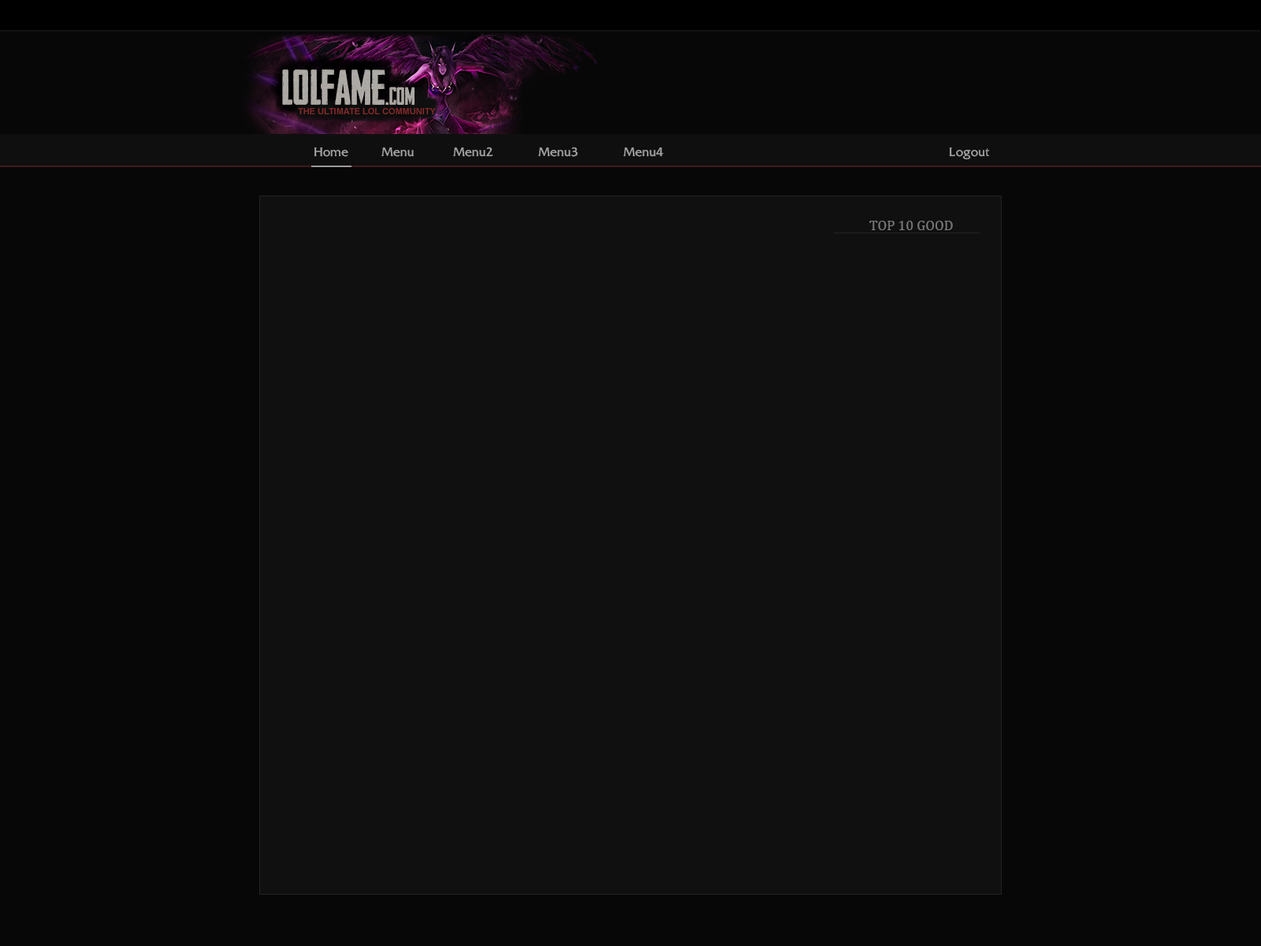
<style>
.page{position:relative;width:1261px;height:946px;background:#070707}
.page>*{position:absolute;margin:0}
.t1{font:47.3px "HeadlinerNo.45";color:#aca8a4}
.t2{font:23.6px "HeadlinerNo.45";color:#aca8a4}
.t3{font:8.7px "Arial-BoldMT";color:#802a2a}
.t4{font:14.2px "FrizQuadrata-Thin";color:#a5a5a5}
.t5{font:14.2px "Cambria";color:#797979}
</style>
<div class="page">
<p class="t1" style="left:282px;top:69px;width:133px;height:36px">LOLFame<span class="t2">.com</span></p>
<p class="t3" style="left:298px;top:108px;width:138px;height:6px">THE ULTIMATE LOL COMMUNITY</p>
<p class="t4" style="left:314px;top:147px;width:34px;height:10px">Home</p>
<p class="t4" style="left:381px;top:147px;width:33px;height:10px">Menu</p>
<p class="t4" style="left:453px;top:147px;width:211px;height:10px">Menu2  Menu3  Menu4</p>
<p class="t4" style="left:949px;top:147px;width:41px;height:13px">Logout</p>
<p class="t5" style="left:869px;top:221px;width:84px;height:9px">TOP 10 GOOD</p>
</div>
